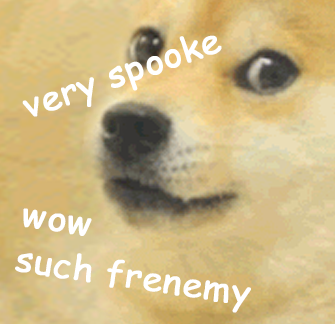
<style>
.page{position:relative;width:335px;height:324px}
.page>*{position:absolute;margin:0}
.t1{font:33.8px "ComicSansMS";color:#ffffff;font-weight:bold;scale:1.06 1}
.t2{font:33.8px/46px "ComicSansMS";color:#ffffff;font-weight:bold;scale:1.06 1}
</style>
<div class="page">
<p class="t1" style="left:22px;top:35px;width:200px;height:82px;rotate:-19deg">very spooke</p>
<p class="t2" style="left:15px;top:208px;width:236px;height:105px;rotate:8deg">wow<br>such frenemy</p>
</div>
